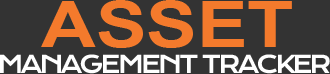
<style>
.page{position:relative;width:330px;height:74px;background:#333333}
.page>*{position:absolute;margin:0}
.t1{font:64px "Arial-BoldMT";color:#f47a2c;scale:1.19 1}
.t2{font:24px "KronaOne-Regular";letter-spacing:-0.12em;color:#ffffff}
</style>
<div class="page">
<p class="t1" style="left:41px;top:0px;width:251px;height:48px">ASSET</p>
<p class="t2" style="left:0px;top:54px;width:330px;height:20px">MANAGEMENT TRACKER</p>
</div>
